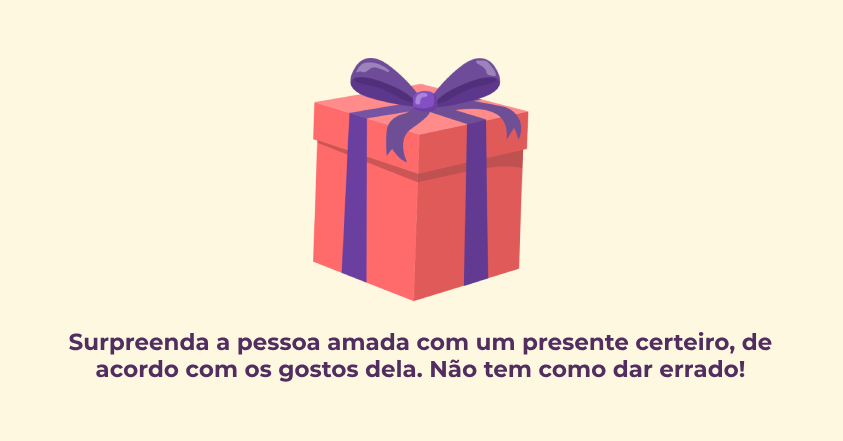
<style>
.page{position:relative;width:843px;height:441px;background:#fff8e1}
.page>*{position:absolute;margin:0}
.t1{font:23px "Montserrat-Bold";color:#512e5f}
</style>
<div class="page">
<p class="t1" style="left:69px;top:331px;width:703px;height:51px;text-align:center">Surpreenda a pessoa amada com um presente certeiro, de<br>acordo com os gostos dela. Não tem como dar errado!</p>
</div>
